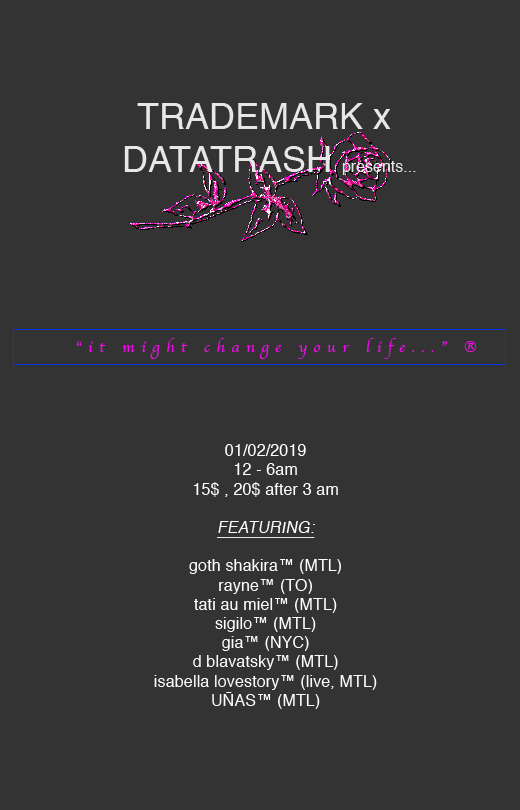
<style>
.page{position:relative;width:520px;height:810px;background:#333333}
.page>*{position:absolute;margin:0}
.t1{font:36px "Helvetica";color:#e7e7e7}
.t2{font:16px "Helvetica";color:#e7e7e7}
.t3{font:16px "Apple-Chancery";letter-spacing:0.4em;color:#ed0ce5}
.t4{font:16px "Helvetica";letter-spacing:0.01em;color:#ffffff}
.t5{font:16px "Helvetica";letter-spacing:0.01em;color:#ffffff;font-style:italic;text-decoration:underline}
</style>
<div class="page">
<p class="t1" style="left:124px;top:103px;width:292px;height:72px;text-align:center">TRADEMARK x<br> DATATRASH <span class="t2">presents...</span></p>
<p class="t3" style="left:76px;top:338px;width:401px;height:21px">“it might change your life...” ®</p>
<p class="t4" style="left:154px;top:444px;width:223px;height:265px;text-align:center">01/02/2019<br>12 - 6am<br>15$ , 20$ after 3 am<br><br><span class="t5">FEATURING:<br><br></span>goth shakira™ (MTL)<br>rayne™ (TO)<br>tati au miel™ (MTL)<br>sigilo™ (MTL) <br>gia™ (NYC)<br>d blavatsky™ (MTL)<br>isabella lovestory™ (live, MTL)<br>UÑAS™ (MTL)</p>
</div>
